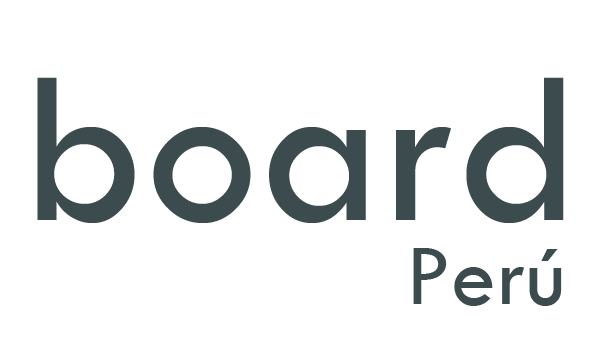
<style>
.page{position:relative;width:600px;height:346px;background:#ffffff}
.page>*{position:absolute;margin:0}
.t1{font:224.1px "TwCenMT-Regular";color:#3b4b4e}
.t2{font:90px "TwCenMT-Regular";color:#3b4b4e}
</style>
<div class="page">
<p class="t1" style="left:37px;top:77px;width:527px;height:146px">board</p>
<p class="t2" style="left:413px;top:248px;width:149px;height:58px">Perú</p>
</div>
